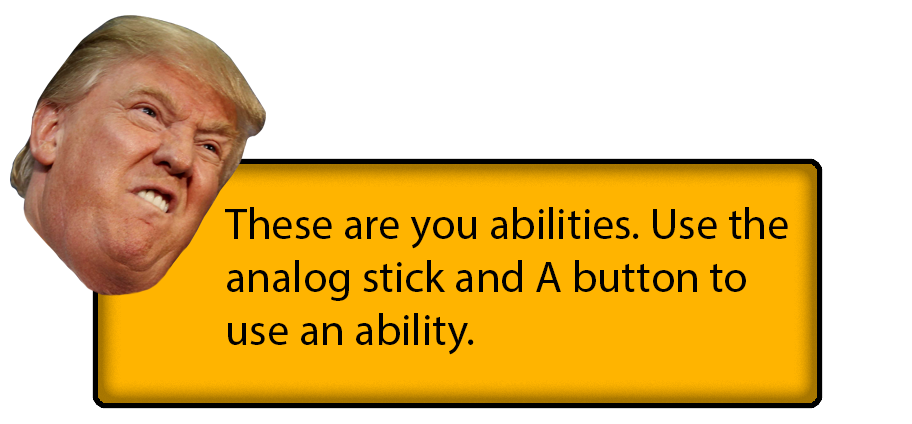
<style>
.page{position:relative;width:912px;height:424px;background:#ffffff}
.page>*{position:absolute;margin:0}
.t1{font:44.4px "MyriadPro-Regular";color:#000000}
</style>
<div class="page">
<p class="t1" style="left:225px;top:207px;width:563px;height:148px">These are you abilities. Use the <br>analog stick and A button to <br>use an ability.</p>
</div>
